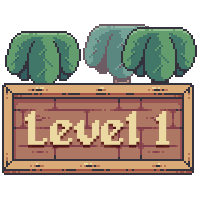
<style>
.page{position:relative;width:200px;height:200px;background:#ffffff}
.page>*{position:absolute;margin:0}
.t1{font:48px "Alagard";letter-spacing:-0.02em;color:#ebd9a1;font-weight:bold}
</style>
<div class="page">
<p class="t1" style="left:25px;top:111px;width:145px;height:34px">Level 1</p>
<p class="t1" style="left:25px;top:114px;width:145px;height:34px">Level 1</p>
</div>
